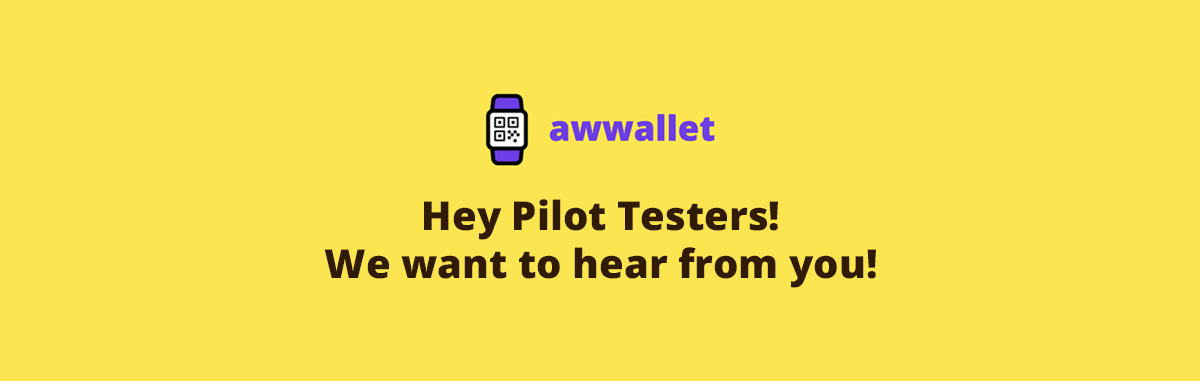
<style>
.page{position:relative;width:1200px;height:381px;background:#fbe551}
.page>*{position:absolute;margin:0}
.t1{font:40px "OpenSansRoman-ExtraBold";color:#321b05}
</style>
<div class="page">
<p class="t1" style="left:324px;top:199px;width:552px;height:89px;text-align:center">Hey Pilot Testers!<br>We want to hear from you!</p>
</div>
